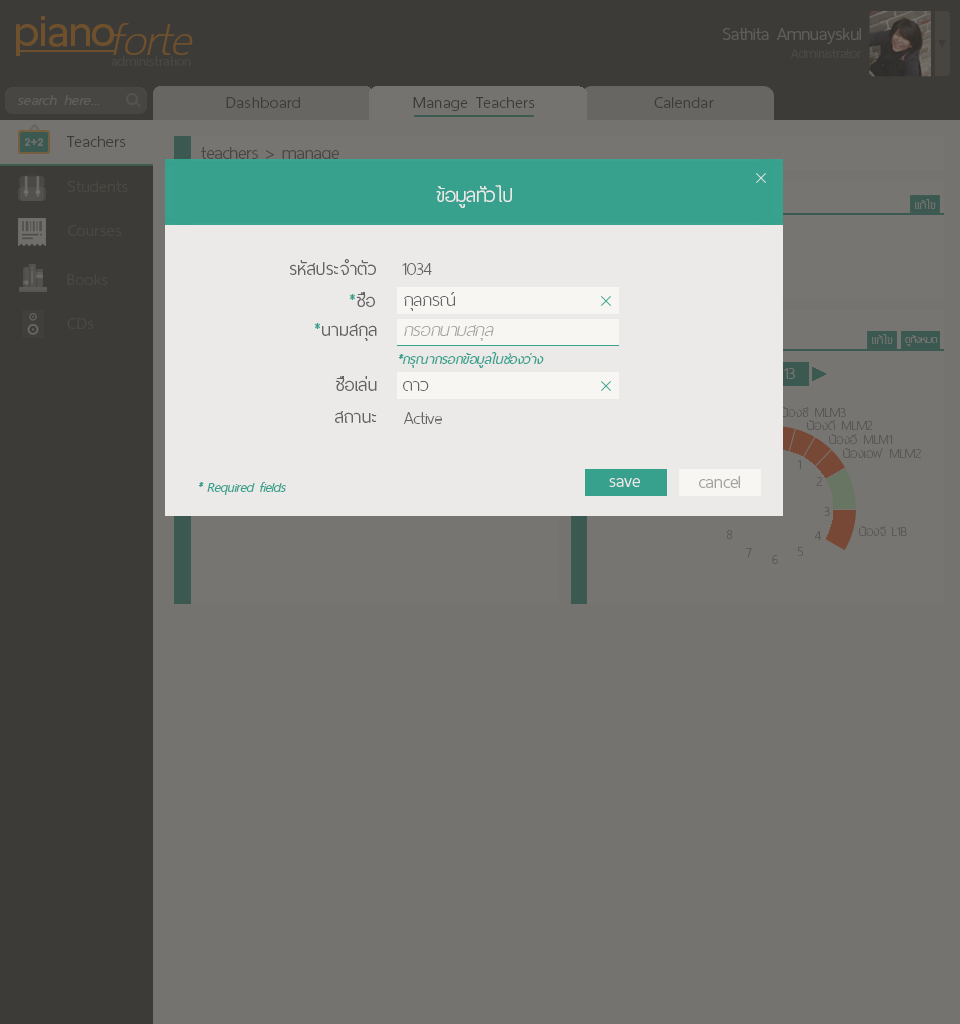
<style>
.page{position:relative;width:960px;height:1024px;background:#75736f}
.page>*{position:absolute;margin:0}
.t1{font:60px "ThaiSansNeue-SemiBold";letter-spacing:-0.005em;color:#6e502c}
.t2{font:62px "ThaiSansNeue-ExtraLightItalic";letter-spacing:-0.005em;color:#6e502c}
.t3{font:24px "ThaiSansNeue-Light";letter-spacing:-0.005em;color:#5f5d5a}
.t4{font:18px "ThaiSansNeue-Light";letter-spacing:-0.005em;color:#4a4843}
.t5{font:18.5px "ThaiSansNeue-ExtraLight";letter-spacing:0.025em;color:#4a4843}
.t6{font:20px "ThaiSansNeue-LightItalic";letter-spacing:0.025em;color:#605e5a}
.t7{font:22px "ThaiSansNeue-Light";letter-spacing:0.025em;color:#3d3b37}
.t8{font:24px "ThaiSansNeue-Light";letter-spacing:-0.005em;color:#484744}
.t9{font:22px "ThaiSansNeue-Light";letter-spacing:0.025em;color:#4a4843}
.t10{font:26px "ThaiSansNeue-Light";letter-spacing:-0.005em;color:#ebeae8}
.t11{font:16px "ThaiSansNeue-UltraLight";color:#777572}
.t12{font:24px "ThaiSansNeue-Light";color:#636363}
.t13{font:24px "ThaiSansNeue-UltraLight";color:#636363}
.t14{font:24px "ThaiSansNeue-Light";color:#37a18e}
.t15{font:24px "ThaiSansNeue-UltraLightItalic";color:#a2a1a0}
.t16{font:14px "ThaiSansNeue-UltraLight";color:#777572}
.t17{font:18px "ThaiSansNeue-LightItalic";color:#37a18e}
.t18{font:18px "ThaiSansNeue-UltraLight";letter-spacing:0.01em;color:#5a5855}
.t19{font:24px "ThaiSansNeue-Light";letter-spacing:-0.005em;color:#ebeae8}
.t20{font:24px "ThaiSansNeue-Light";color:#a2a1a0}
.t21{font:18px "ThaiSansNeue-UltraLight";color:#5a5855}
.t22{font:18px "ThaiSansNeue-UltraLight";letter-spacing:0.01em}
</style>
<div class="page">
<p class="t1" style="left:16px;top:16px;width:98px;height:40px">piano</p>
<p class="t2" style="left:113px;top:23px;width:80px;height:32px">forte</p>
<p class="t3" style="left:723px;top:28px;width:138px;height:16px">Sathita Amnuayskul</p>
<p class="t4" style="left:791px;top:49px;width:71px;height:9px">Administrator</p>
<p class="t5" style="left:111px;top:56px;width:80px;height:10px">administration</p>
<p class="t6" style="left:17px;top:95px;width:83px;height:10px">search here...</p>
<p class="t7" style="left:226px;top:97px;width:74px;height:11px">Dashboard</p>
<p class="t7" style="left:413px;top:97px;width:122px;height:14px">Manage Teachers</p>
<p class="t7" style="left:654px;top:97px;width:60px;height:11px">Calendar</p>
<p class="t7" style="left:66px;top:136px;width:60px;height:11px">Teachers</p>
<p class="t8" style="left:201px;top:147px;width:138px;height:16px">teachers &gt; manage</p>
<p class="t9" style="left:67px;top:181px;width:61px;height:11px">Students</p>
<p class="t10" style="left:436px;top:185px;width:76px;height:23px">ข้อมูลทั่วไป</p>
<p class="t11" style="left:915px;top:199px;width:21px;height:10px">แก้ไข</p>
<p class="t9" style="left:68px;top:225px;width:54px;height:11px">Courses</p>
<p class="t12" style="left:290px;top:259px;width:86px;height:16px">รหัสประจำตัว</p>
<p class="t13" style="left:402px;top:263px;width:30px;height:12px">1034</p>
<p class="t9" style="left:67px;top:274px;width:41px;height:11px">Books</p>
<p class="t12" style="left:349px;top:292px;width:26px;height:15px"><span class="t14">*</span>ชื่อ</p>
<p class="t13" style="left:404px;top:292px;width:51px;height:19px">กุลภรณ์</p>
<p class="t9" style="left:67px;top:318px;width:27px;height:11px">CDs</p>
<p class="t12" style="left:314px;top:323px;width:63px;height:18px"><span class="t14">*</span>นามสกุล</p>
<p class="t15" style="left:404px;top:325px;width:90px;height:16px">กรอกนามสกุล</p>
<p class="t11" style="left:872px;top:334px;width:21px;height:10px">แก้ไข</p>
<p class="t16" style="left:905px;top:335px;width:33px;height:11px">ดูทั้งหมด</p>
<p class="t17" style="left:398px;top:352px;width:146px;height:16px">*กรุณากรอกข้อมูลในช่องว่าง</p>
<p class="t12" style="left:335px;top:376px;width:42px;height:15px">ชื่อเล่น</p>
<p class="t13" style="left:403px;top:381px;width:26px;height:10px">ดาว</p>
<p class="t12" style="left:335px;top:411px;width:42px;height:12px">สถานะ</p>
<p class="t13" style="left:404px;top:412px;width:38px;height:12px">Active</p>
<p class="t18" style="left:781px;top:407px;width:65px;height:10px">น้องซี MLM3</p>
<p class="t18" style="left:807px;top:420px;width:66px;height:10px">น้องดี MLM2</p>
<p class="t18" style="left:829px;top:434px;width:64px;height:10px">น้องอี MLM1</p>
<p class="t18" style="left:843px;top:448px;width:79px;height:10px">น้องเอฟ MLM2</p>
<p class="t18" style="left:797px;top:460px;width:4px;height:9px">1</p>
<p class="t17" style="left:198px;top:482px;width:88px;height:13px">* Required fields</p>
<p class="t19" style="left:609px;top:478px;width:31px;height:9px">save</p>
<p class="t20" style="left:699px;top:476px;width:41px;height:12px">cancel</p>
<p class="t18" style="left:816px;top:477px;width:7px;height:9px">2</p>
<p class="t18" style="left:824px;top:507px;width:6px;height:9px">3</p>
<p class="t18" style="left:726px;top:530px;width:7px;height:9px">8</p>
<p class="t18" style="left:814px;top:531px;width:7px;height:9px">4</p>
<p class="t21" style="left:859px;top:526px;width:48px;height:10px">น้องจี L1B</p>
<p class="t18" style="left:746px;top:548px;width:6px;height:9px">7</p>
<p class="t22" style="left:772px;top:555px;width:6px;height:9px">6</p>
<p class="t18" style="left:798px;top:547px;width:6px;height:9px">5</p>
</div>
